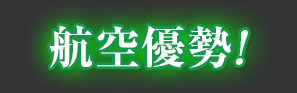
<style>
.page{position:relative;width:297px;height:93px}
.page>*{position:absolute;margin:0}
.t1{font:45px "RyuminPro-ExBold";letter-spacing:0.025em;color:#ffffff}
.t2{font:45px "RyuminPro-ExBold";letter-spacing:0.025em;color:#ffffff;font-style:italic}
</style>
<div class="page">
<p class="t1" style="left:49px;top:25px;width:199px;height:43px">航空優勢<span class="t2">!</span></p>
</div>
